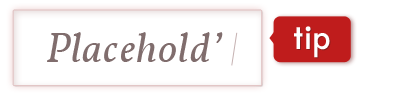
<style>
.page{position:relative;width:396px;height:100px;background:#ffffff}
.page>*{position:absolute;margin:0}
.t1{font:33.3px "Edmondsans-Medium";color:#ffffff}
.t2{font:33.3px "Edmondsans-Medium"}
.t3{font:41.7px "Vollkorn-Italic";letter-spacing:0.025em;color:#806d6d}
</style>
<div class="page">
<p class="t1" style="left:294px;top:26px;width:36px;height:32px">tip</p>
<p class="t2" style="left:295px;top:27px;width:36px;height:32px">tip</p>
<p class="t3" style="left:47px;top:32px;width:176px;height:30px">Placehold’</p>
</div>
